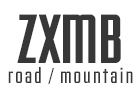
<style>
.page{position:relative;width:140px;height:91px;background:#ffffff}
.page>*{position:absolute;margin:0}
.t1{font:71.9px "Fairview-Regular";color:#373737;text-transform:uppercase;font-weight:bold}
.t2{font:23.5px "Fairview-Regular";letter-spacing:0.088em;color:#373737}
.t3{font:75px "Fairview-Regular";letter-spacing:-0.005em;color:#373737;text-transform:uppercase}
.t4{font:18.3px "Fairview-Regular";letter-spacing:0.088em;color:#373737}
</style>
<div class="page">
<p class="t1" style="left:17px;top:14px;width:104px;height:49px">ZXMB</p>
<p class="t2" style="left:8px;top:67px;width:125px;height:17px"><span class="t3"><br></span>road <span class="t4">/ </span>mountain</p>
</div>
